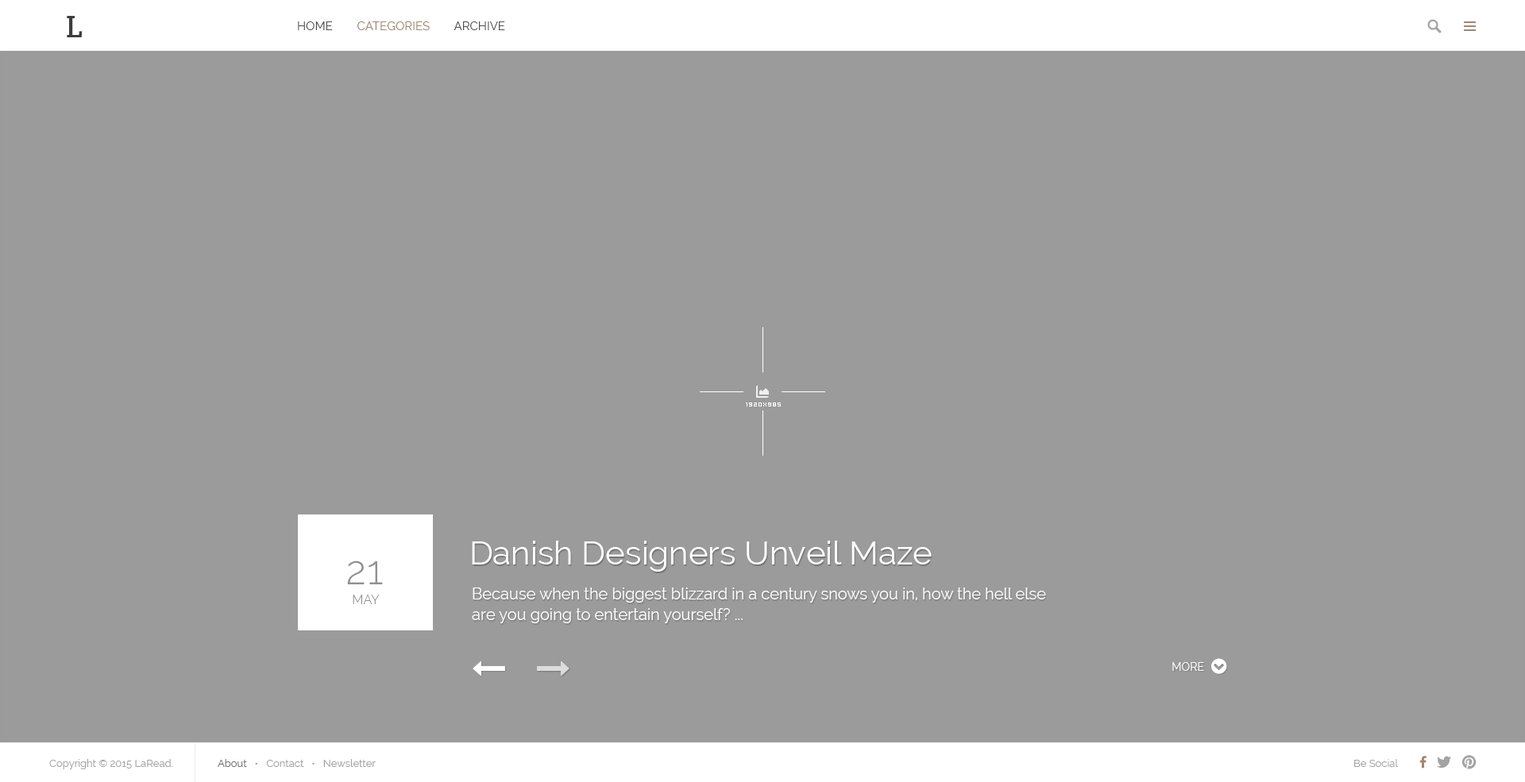
<style>
.page{position:relative;width:1525px;height:782px;background:#9b9b9b}
.page>*{position:absolute;margin:0}
.t1{font:11.9px "Raleway";color:#a28671}
.t2{font:11.9px "Raleway";color:#505053}
.t3{font:33.4px "Raleway";color:#ffffff}
.t4{font:39.7px "Raleway-Light";color:#909091}
.t5{font:15.9px/20.6px "Raleway";color:#ffffff}
.t6{font:12.7px "Raleway-Light";color:#909091}
.t7{font:11.1px "Raleway";color:#ffffff;text-transform:uppercase}
.t8{font:10.3px "Raleway";color:#a3a3a3}
.t9{font:10.3px "Raleway";color:#6d6d70}
</style>
<div class="page">
<p class="t1" style="left:298px;top:21px;width:207px;height:9px"><span class="t2">HOME        </span>CATEGORIES<span class="t2">        ARCHIVE</span></p>
<p class="t3" style="left:472px;top:541px;width:459px;height:31px">Danish Designers Unveil Maze</p>
<p class="t4" style="left:347px;top:561px;width:36px;height:23px">21</p>
<p class="t5" style="left:472px;top:588px;width:574px;height:35px">Because when the biggest blizzard in a century snows you in, how the hell else are you going to entertain yourself? ...</p>
<p class="t6" style="left:353px;top:595px;width:27px;height:9px">MAY</p>
<p class="t7" style="left:1172px;top:662px;width:32px;height:9px">MORE</p>
<p class="t8" style="left:49px;top:759px;width:124px;height:10px">Copyright © 2015 LaRead.</p>
<p class="t8" style="left:218px;top:759px;width:158px;height:8px"><span class="t9">About   </span>•   Contact   •   Newsletter</p>
<p class="t8" style="left:1354px;top:759px;width:44px;height:8px">Be Social</p>
</div>
